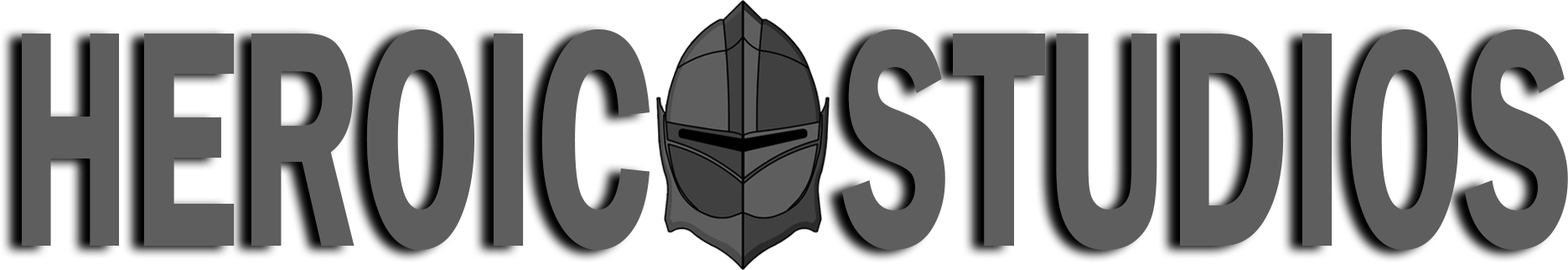
<style>
.page{position:relative;width:1568px;height:270px;background:#5e5e5e}
.page>*{position:absolute;margin:0}
.t1{font:318.5px "FranklinGothic-Demi";color:#5e5e5e;scale:0.59 1}
</style>
<div class="page">
<p class="t1" style="left:22px;top:29px;width:1546px;height:221px">HEROIC    STUDIOS</p>
</div>
